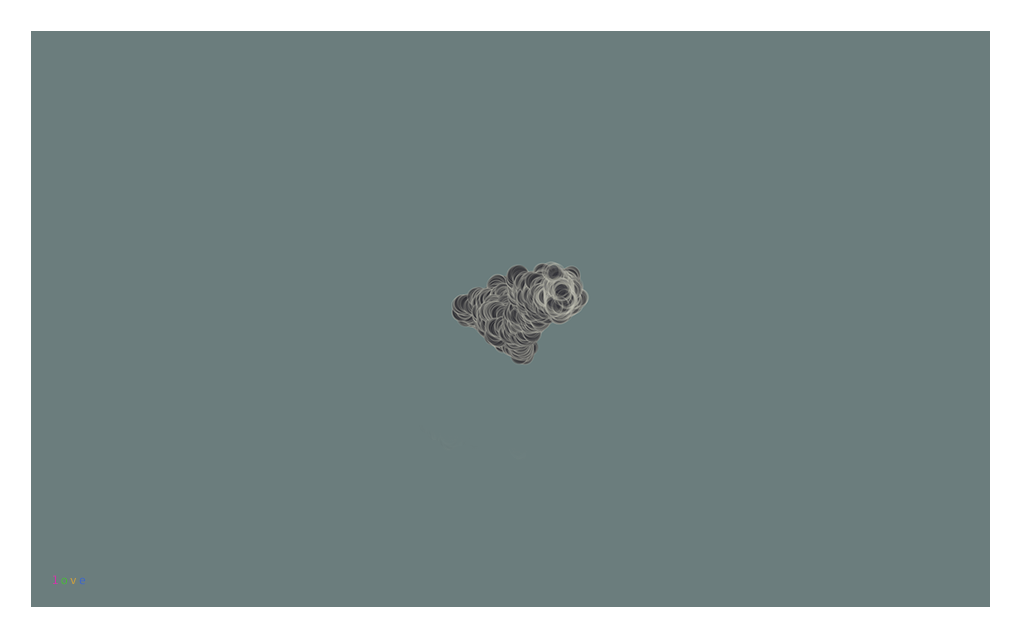
<style>
.page{position:relative;width:1021px;height:638px;background:#6b7d7d}
.page>*{position:absolute;margin:0}
.t1{font:12px "Consolas";letter-spacing:0.2em;color:#d42fab}
.t2{font:12px "Consolas";letter-spacing:0.2em;color:#46b92f}
.t3{font:12px "Consolas";letter-spacing:0.2em;color:#ca9f39}
.t4{font:12px "Consolas";letter-spacing:0.2em;color:#3965ca}
</style>
<div class="page">
<p class="t1" style="left:53px;top:575px;width:32px;height:10px">l<span class="t2">o</span><span class="t3">v</span><span class="t4">e</span></p>
</div>
